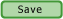
<style>
.page{position:relative;width:63px;height:19px;background:#b1d7a9}
.page>*{position:absolute;margin:0}
.t1{font:10px "Tahoma";letter-spacing:0.1em;color:#060505}
</style>
<div class="page">
<p class="t1" style="left:18px;top:5px;width:24px;height:8px">Save</p>
</div>
